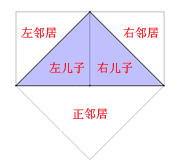
<style>
.page{position:relative;width:181px;height:162px;background:#ffffff}
.page>*{position:absolute;margin:0}
.t1{font:12px "SimSun"}
</style>
<div class="page">
<p class="t1" style="left:21px;top:27px;width:138px;height:12px">左邻居           右邻居</p>
<p class="t1" style="left:49px;top:62px;width:84px;height:12px">左儿子  右儿子</p>
<p class="t1" style="left:73px;top:108px;width:35px;height:12px">正邻居</p>
</div>
